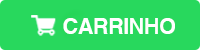
<style>
.page{position:relative;width:200px;height:50px;background:#28d85d}
.page>*{position:absolute;margin:0}
.t1{font:21.7px "Helvetica-Bold";letter-spacing:-0.025em;color:#ffffff}
</style>
<div class="page">
<p class="t1" style="left:63px;top:18px;width:112px;height:16px">CARRINHO</p>
</div>
